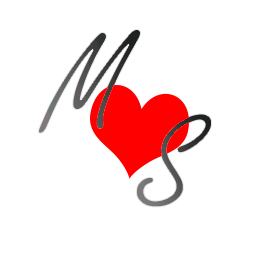
<style>
.page{position:relative;width:256px;height:256px;background:#ffffff}
.page>*{position:absolute;margin:0}
.t1{font:144px "FreestyleScript-Regular";letter-spacing:-0.01em;color:#ffffff}
</style>
<div class="page">
<p class="t1" style="left:38px;top:29px;width:104px;height:105px">M</p>
<p class="t1" style="left:136px;top:113px;width:76px;height:95px">S</p>
</div>
